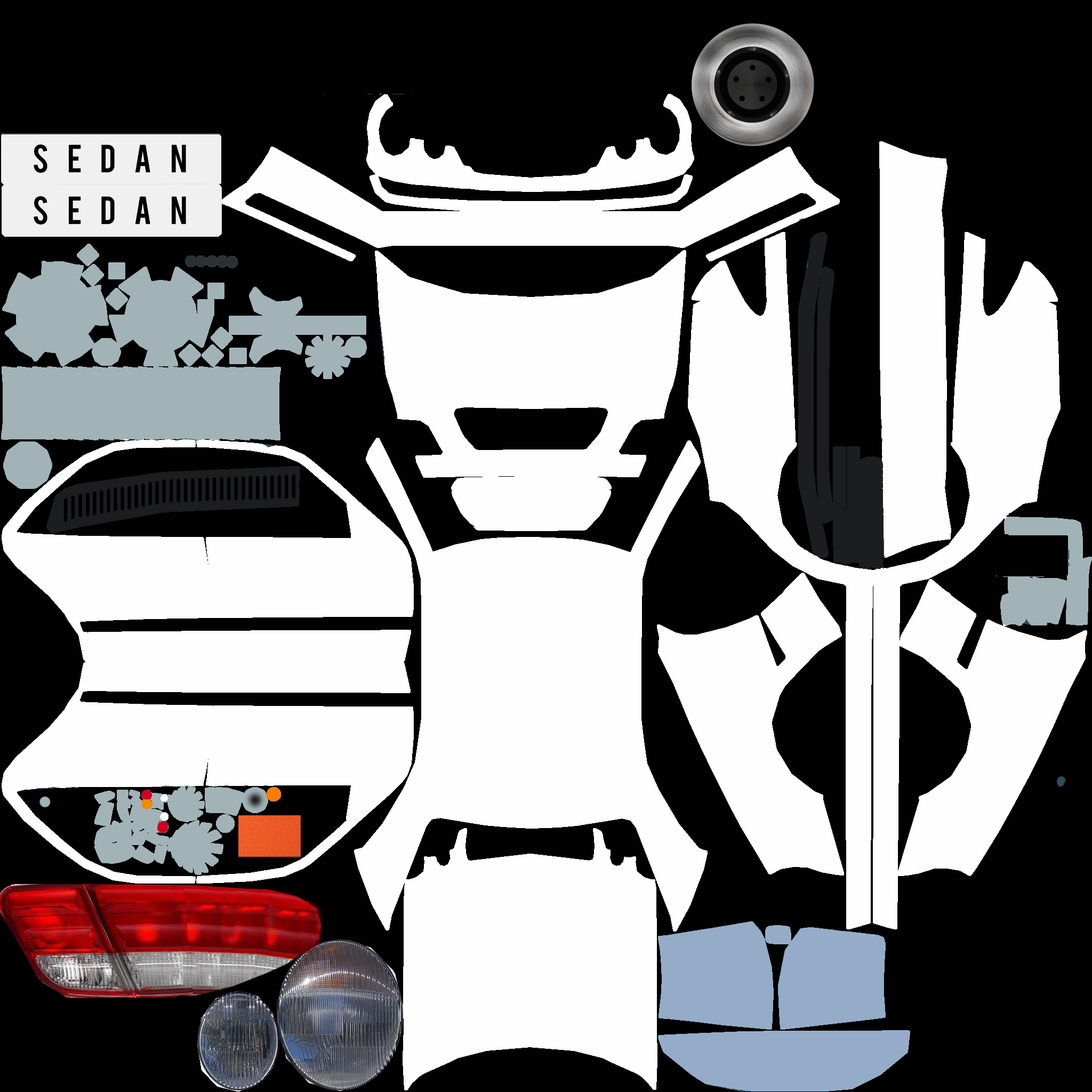
<style>
.page{position:relative;width:1092px;height:1092px;background:#010101}
.page>*{position:absolute;margin:0}
.t1{font:30.9px "Bebas";letter-spacing:0.58em;color:#000000}
</style>
<div class="page">
<p class="t1" style="left:34px;top:144px;width:152px;height:29px">SEDAN</p>
<p class="t1" style="left:34px;top:196px;width:152px;height:28px">SEDAN</p>
</div>
